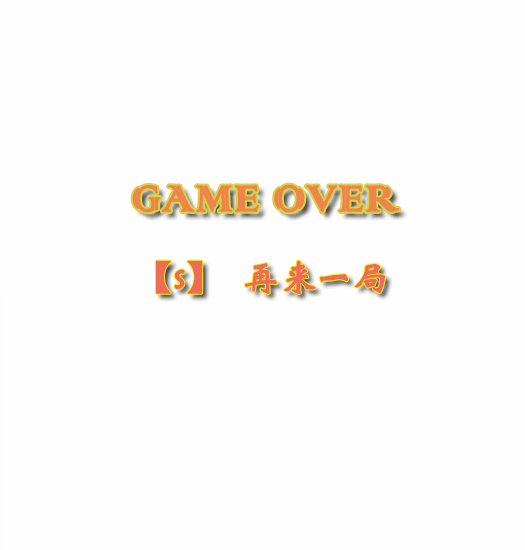
<style>
.page{position:relative;width:525px;height:550px;background:#fefefe}
.page>*{position:absolute;margin:0}
.t1{font:48px "ColonnaMT";color:#ef844a;font-weight:bold}
.t2{font:36px "STXinwei";color:#ee6b55;font-weight:bold}
</style>
<div class="page">
<p class="t1" style="left:132px;top:184px;width:268px;height:29px">GAME OVER</p>
<p class="t2" style="left:156px;top:260px;width:230px;height:34px">【s】  再来一局</p>
</div>
